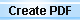
<style>
.page{position:relative;width:80px;height:20px}
.page>*{position:absolute;margin:0}
.t1{font:12px "Arial-BoldMT";color:#101010}
</style>
<div class="page">
<p class="t1" style="left:9px;top:6px;width:62px;height:9px">Create PDF</p>
</div>
